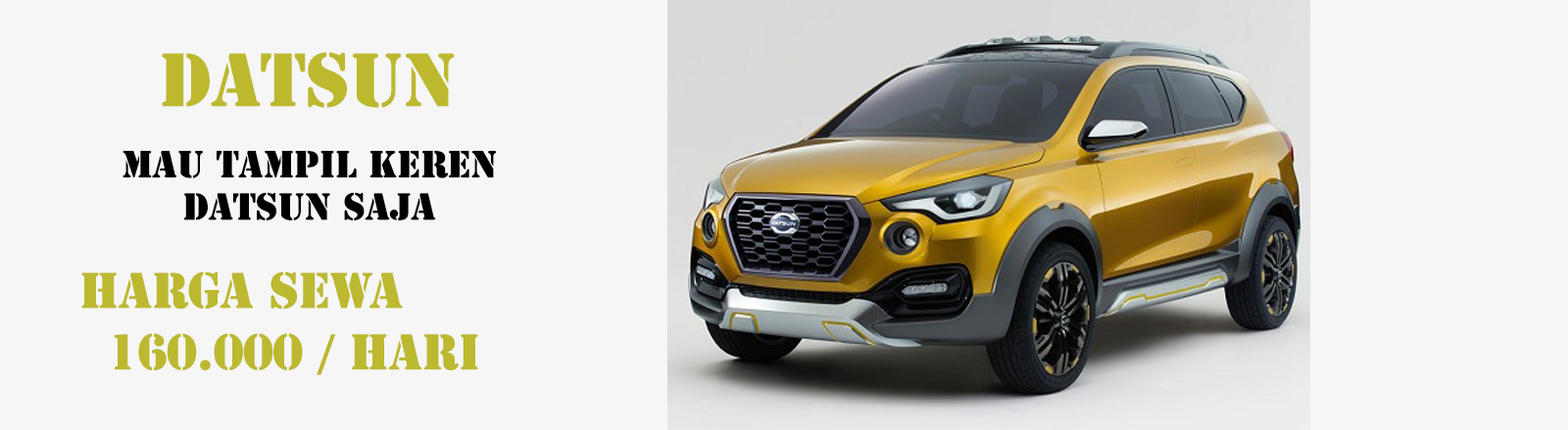
<style>
.page{position:relative;width:1568px;height:430px;background:#f6f6f6}
.page>*{position:absolute;margin:0}
.t1{font:70.6px "StencilStd";color:#bcb92f}
.t2{font:35.3px "StencilStd";color:#000000}
.t3{font:47px "StencilStd";color:#bcb931}
</style>
<div class="page">
<p class="t1" style="left:162px;top:52px;width:293px;height:56px">datsun</p>
<p class="t2" style="left:122px;top:151px;width:375px;height:69px;text-align:center">Mau tampil keren<br>datsun saja</p>
<p class="t3" style="left:81px;top:271px;width:322px;height:39px">HARGA SEWA</p>
<p class="t3" style="left:114px;top:333px;width:364px;height:42px">160.000 / hari</p>
</div>
